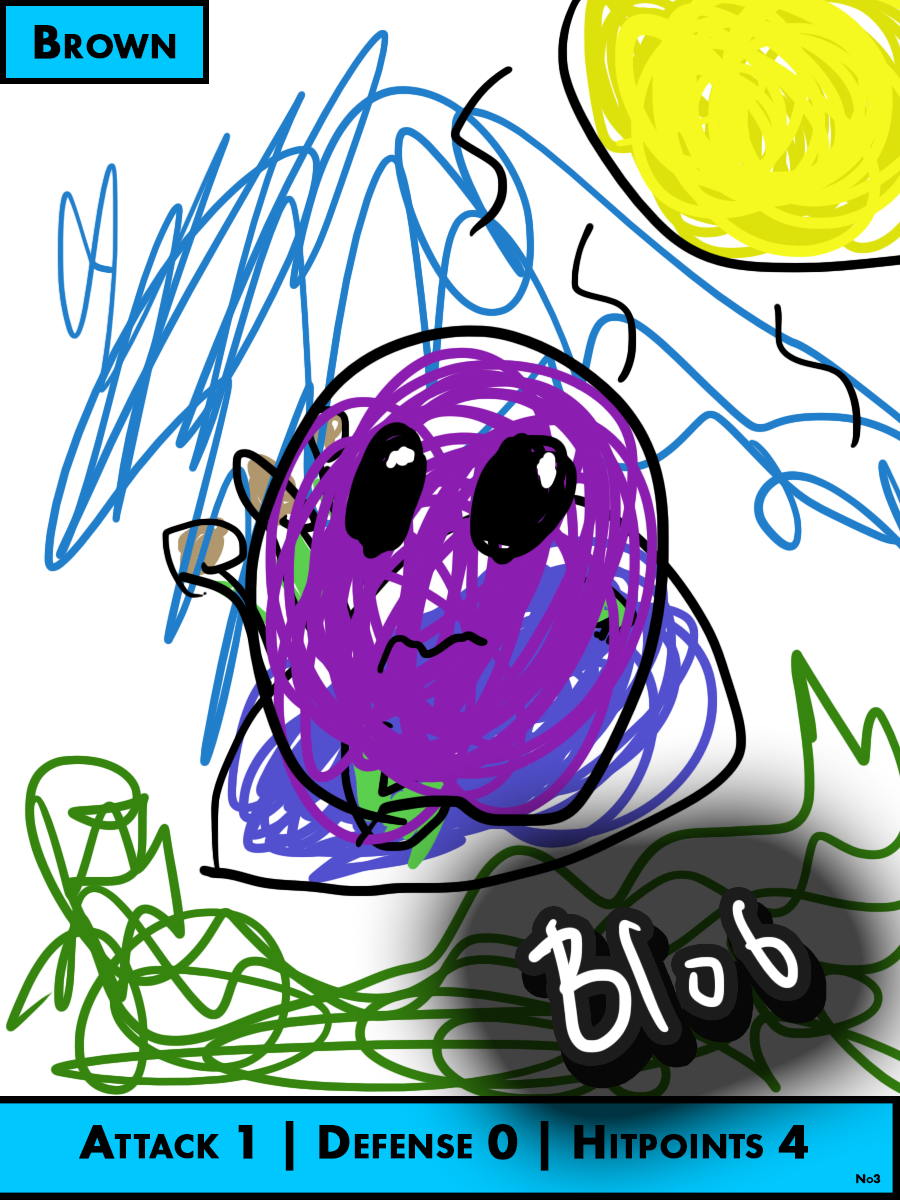
<style>
.page{position:relative;width:900px;height:1200px;background:#ffffff}
.page>*{position:absolute;margin:0}
.t1{font:50px "FuturaPT-Heavy";color:#000000;font-variant:small-caps;font-weight:bold}
.t2{font:12.5px "FuturaPT-Heavy";color:#000000;font-variant:small-caps;font-weight:bold}
</style>
<div class="page">
<p class="t1" style="left:34px;top:25px;width:142px;height:34px">Brown</p>
<p class="t1" style="left:79px;top:1121px;width:729px;height:50px">Attack 1 | Defense 0 | Hitpoints 4</p>
<p class="t2" style="left:856px;top:1174px;width:25px;height:10px">No3</p>
</div>
